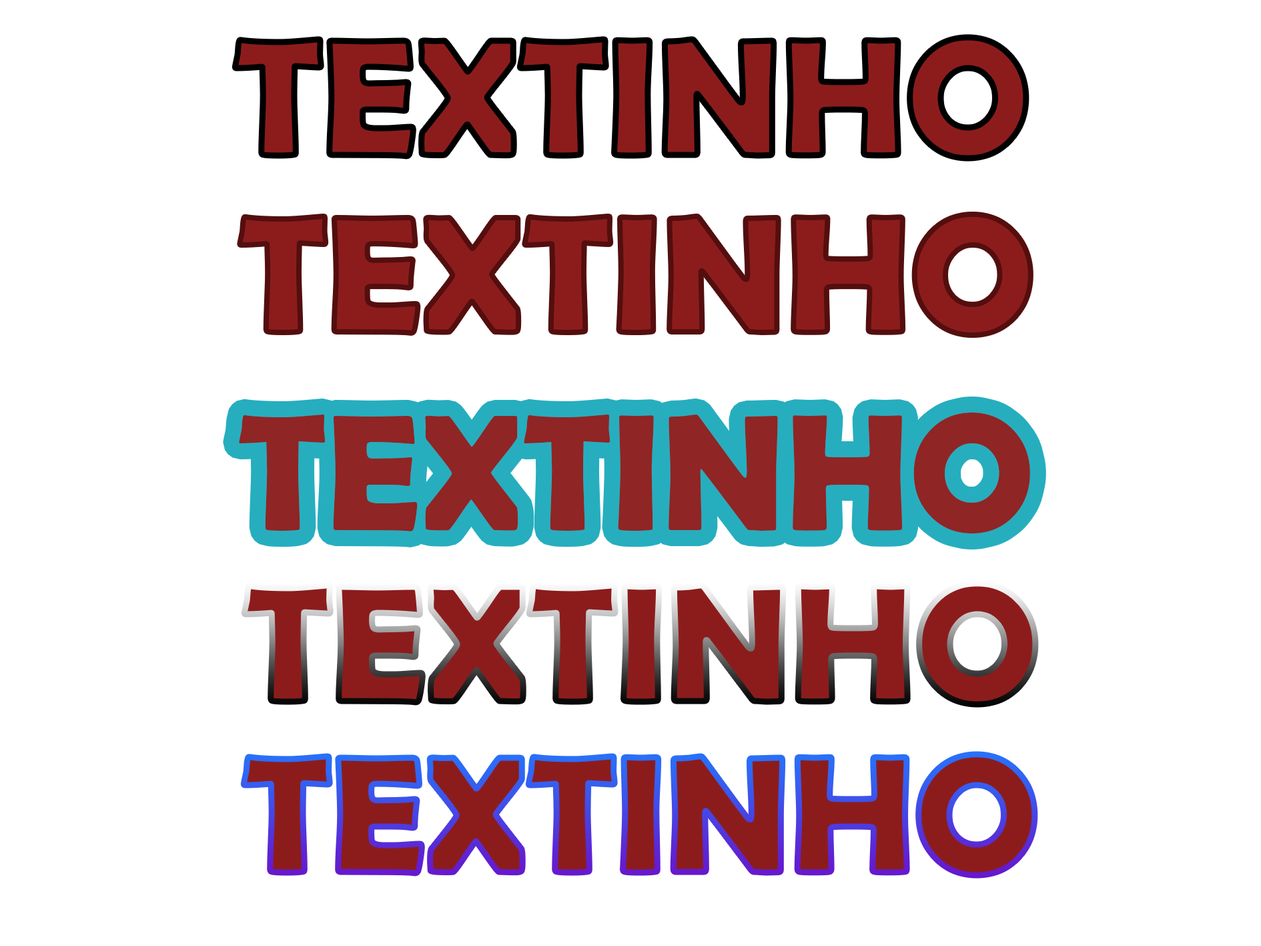
<style>
.page{position:relative;width:1261px;height:946px;background:#ffffff}
.page>*{position:absolute;margin:0}
.t1{font:166.8px "BerlinSansFBDemi-Bold";color:#8c1c1c}
</style>
<div class="page">
<p class="t1" style="left:235px;top:37px;width:791px;height:121px">TEXTINHO</p>
<p class="t1" style="left:240px;top:214px;width:791px;height:121px">TEXTINHO</p>
<p class="t1" style="left:239px;top:412px;width:791px;height:121px">TEXTINHO</p>
<p class="t1" style="left:244px;top:583px;width:792px;height:121px">TEXTINHO</p>
<p class="t1" style="left:244px;top:754px;width:791px;height:121px">TEXTINHO</p>
</div>
